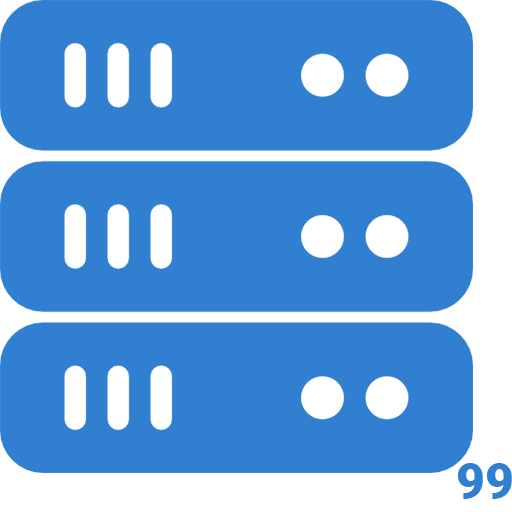
<style>
.page{position:relative;width:512px;height:512px;background:#307fd0}
.page>*{position:absolute;margin:0}
.t1{font:50px "Roboto-Black";color:#307fd0}
</style>
<div class="page">
<p class="t1" style="left:457px;top:463px;width:55px;height:36px">99</p>
</div>
